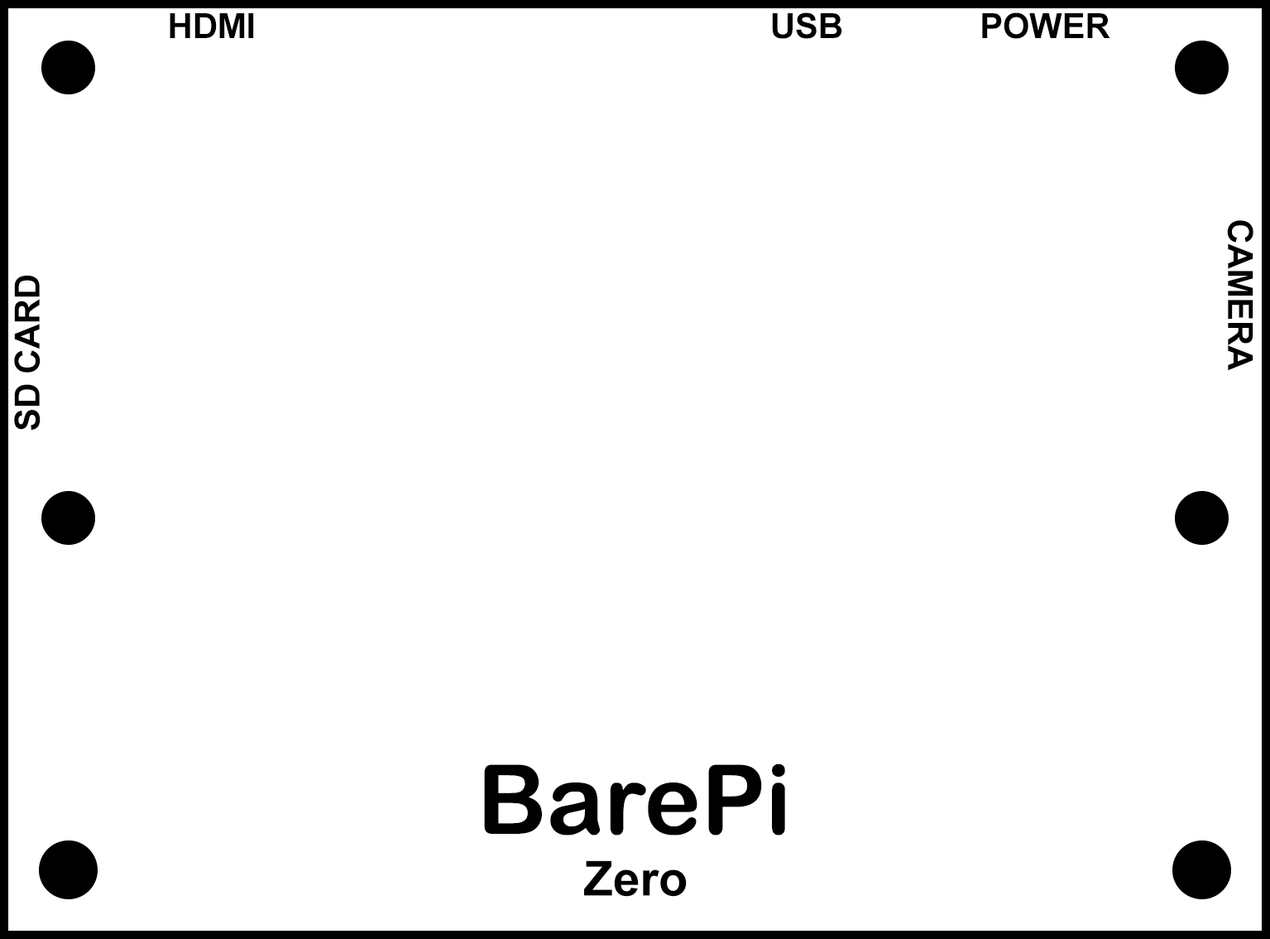
<style>
.page{position:relative;width:1270px;height:939px;background:#ffffff}
.page>*{position:absolute;margin:0}
.t1{font:34.5px "Arial-BoldMT";color:#000000}
.t2{font:96.6px "ArialRoundedMTBold";color:#000000}
.t3{font:48.3px "Arial-BoldMT";color:#000000}
</style>
<div class="page">
<p class="t1" style="left:170px;top:13px;width:84px;height:25px">HDMI</p>
<p class="t1" style="left:772px;top:12px;width:71px;height:27px">USB</p>
<p class="t1" style="left:982px;top:12px;width:129px;height:27px">POWER</p>
<p class="t1" style="left:1227px;top:220px;width:27px;height:151px;rotate:90deg">CAMERA</p>
<p class="t1" style="left:14px;top:275px;width:27px;height:155px;rotate:-90deg">SD CARD</p>
<p class="t2" style="left:484px;top:763px;width:301px;height:72px">BarePi</p>
<p class="t3" style="left:584px;top:860px;width:103px;height:36px">Zero</p>
</div>
